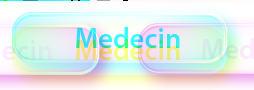
<style>
.page{position:relative;width:254px;height:90px}
.page>*{position:absolute;margin:0}
.t1{font:29.2px "MyriadPro-Semibold"}
</style>
<div class="page">
<p class="t1" style="left:76px;top:27px;width:104px;height:21px">Medecin</p>
</div>
